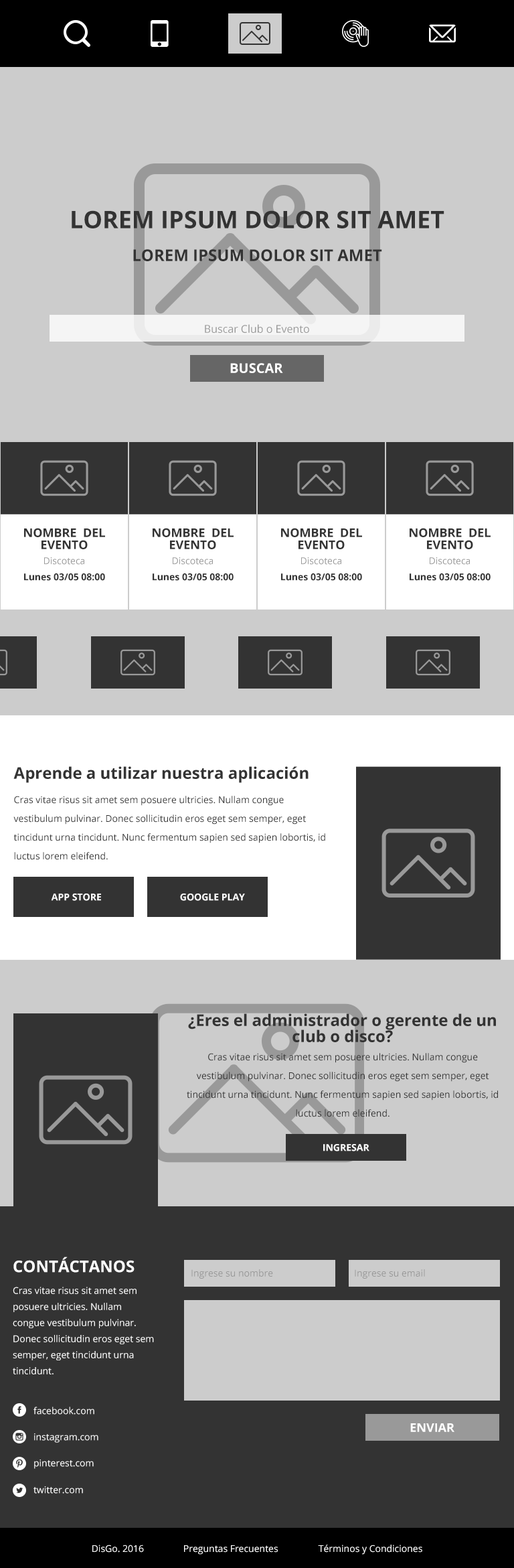
<style>
.page{position:relative;width:514px;height:1568px;background:#cccccc}
.page>*{position:absolute;margin:0}
.t1{font:24.1px "OpenSans-Bold";color:#333333;text-transform:uppercase}
.t2{font:16.1px "OpenSans-Bold";color:#333333;text-transform:uppercase}
.t3{font:10.7px "OpenSans";color:#999999}
.t4{font:13.4px "OpenSans-Bold";color:#ffffff;text-transform:uppercase}
.t5{font:12.1px/12.1px "OpenSans-Bold";color:#333333;text-transform:uppercase}
.t6{font:9.4px "OpenSans";color:#999999}
.t7{font:9.4px "OpenSans-Bold";color:#333333}
.t8{font:16.1px "OpenSans-Bold";color:#333333}
.t9{font:9.4px/18.8px "OpenSans";color:#333333}
.t10{font:9.4px "OpenSans-Bold";color:#ffffff;text-transform:uppercase}
.t11{font:16.1px/16.1px "OpenSans-Bold";color:#333333}
.t12{font:16.1px "OpenSans-Bold";color:#ffffff}
.t13{font:9.4px/16.1px "OpenSans";color:#ffffff}
.t14{font:9.4px "OpenSans";color:#ffffff}
.t15{font:12.1px "OpenSans-Bold";color:#ffffff;text-transform:uppercase}
</style>
<div class="page">
<p class="t1" style="left:72px;top:210px;width:373px;height:18px">Lorem ipsum dolor sit amet</p>
<p class="t2" style="left:133px;top:249px;width:249px;height:12px">Lorem ipsum dolor sit amet</p>
<p class="t3" style="left:205px;top:324px;width:104px;height:9px">Buscar Club o Evento</p>
<p class="t4" style="left:230px;top:363px;width:53px;height:10px">Buscar</p>
<p class="t5" style="left:24px;top:528px;width:81px;height:21px;text-align:center">Nombre  del evento</p>
<p class="t5" style="left:153px;top:528px;width:81px;height:21px;text-align:center">Nombre  del evento</p>
<p class="t5" style="left:281px;top:528px;width:81px;height:21px;text-align:center">Nombre  del evento</p>
<p class="t5" style="left:410px;top:528px;width:81px;height:21px;text-align:center">Nombre  del evento</p>
<p class="t6" style="left:44px;top:557px;width:40px;height:8px">Discoteca</p>
<p class="t6" style="left:173px;top:557px;width:40px;height:8px">Discoteca</p>
<p class="t6" style="left:301px;top:557px;width:41px;height:8px">Discoteca</p>
<p class="t6" style="left:430px;top:557px;width:40px;height:8px">Discoteca</p>
<p class="t7" style="left:24px;top:573px;width:81px;height:8px">Lunes 03/05 08:00</p>
<p class="t7" style="left:153px;top:573px;width:81px;height:8px">Lunes 03/05 08:00</p>
<p class="t7" style="left:281px;top:573px;width:81px;height:8px">Lunes 03/05 08:00</p>
<p class="t7" style="left:410px;top:573px;width:81px;height:8px">Lunes 03/05 08:00</p>
<p class="t8" style="left:13px;top:766px;width:296px;height:17px">Aprende a utilizar nuestra aplicación</p>
<p class="t9" style="left:13px;top:796px;width:313px;height:64px">Cras vitae risus sit amet sem posuere ultricies. Nullam congue vestibulum pulvinar. Donec sollicitudin eros eget sem semper, eget tincidunt urna tincidunt. Nunc fermentum sapien sed sapien lobortis, id luctus lorem eleifend.</p>
<p class="t10" style="left:51px;top:894px;width:50px;height:7px">App Store</p>
<p class="t10" style="left:180px;top:894px;width:65px;height:7px">Google Play</p>
<p class="t11" style="left:188px;top:1013px;width:308px;height:29px;text-align:center">¿Eres el administrador o gerente de un club o disco?</p>
<p class="t9" style="left:187px;top:1053px;width:311px;height:64px;text-align:center">Cras vitae risus sit amet sem posuere ultricies. Nullam congue vestibulum pulvinar. Donec sollicitudin eros eget sem semper, eget tincidunt urna tincidunt. Nunc fermentum sapien sed sapien lobortis, id luctus lorem eleifend.</p>
<p class="t10" style="left:324px;top:1144px;width:46px;height:7px">Ingresar</p>
<p class="t12" style="left:13px;top:1257px;width:122px;height:16px">CONTÁCTANOS</p>
<p class="t6" style="left:192px;top:1269px;width:81px;height:10px">Ingrese su nombre</p>
<p class="t6" style="left:355px;top:1269px;width:70px;height:10px">Ingrese su email</p>
<p class="t13" style="left:13px;top:1287px;width:141px;height:87px">Cras vitae risus sit amet sem posuere ultricies. Nullam congue vestibulum pulvinar. Donec sollicitudin eros eget sem semper, eget tincidunt urna tincidunt.</p>
<p class="t14" style="left:33px;top:1407px;width:61px;height:8px">facebook.com</p>
<p class="t14" style="left:34px;top:1433px;width:64px;height:10px">instagram.com</p>
<p class="t15" style="left:411px;top:1423px;width:44px;height:9px">Enviar</p>
<p class="t14" style="left:34px;top:1459px;width:60px;height:10px">pinterest.com</p>
<p class="t14" style="left:33px;top:1486px;width:50px;height:8px">twitter.com</p>
<p class="t14" style="left:92px;top:1545px;width:52px;height:8px">DisGo. 2016</p>
<p class="t14" style="left:184px;top:1545px;width:94px;height:10px">Preguntas Frecuentes</p>
<p class="t14" style="left:318px;top:1545px;width:105px;height:10px">Términos y Condiciones</p>
</div>
